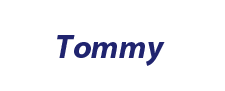
<style>
.page{position:relative;width:225px;height:91px;background:#ffffff}
.page>*{position:absolute;margin:0}
.t1{font:33.3px "MyriadPro-BoldIt";color:#20246f}
</style>
<div class="page">
<p class="t1" style="left:57px;top:35px;width:108px;height:31px">Tommy</p>
</div>
